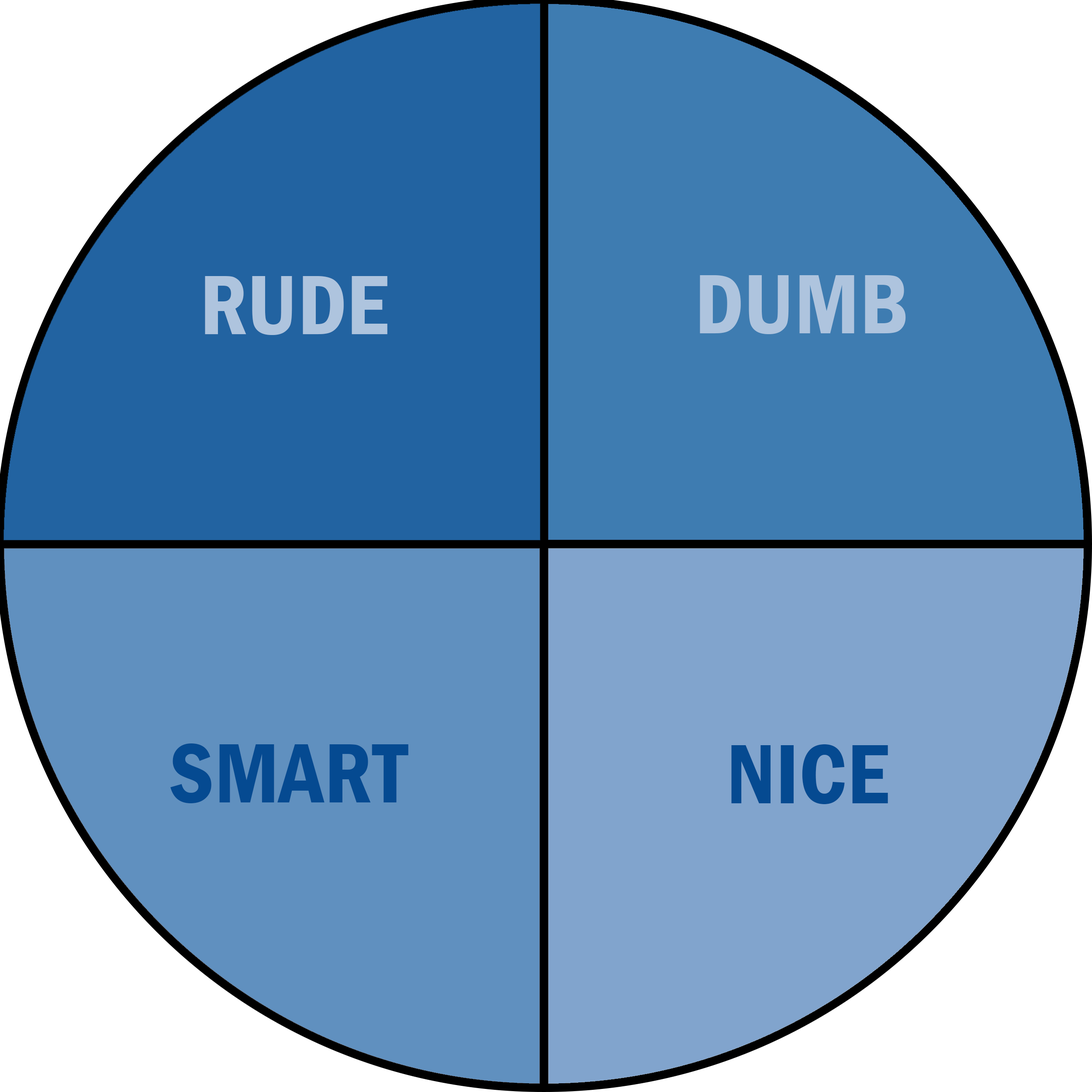
<style>
.page{position:relative;width:1092px;height:1092px;background:#ffffff}
.page>*{position:absolute;margin:0}
.t1{font:87.4px "FranklinGothic-DemiCond";color:#aec4de}
.t2{font:87.4px "FranklinGothic-DemiCond";color:#054a91}
</style>
<div class="page">
<p class="t1" style="left:205px;top:276px;width:182px;height:59px">RUDE</p>
<p class="t1" style="left:700px;top:275px;width:206px;height:59px">DUMB</p>
<p class="t2" style="left:170px;top:743px;width:238px;height:60px">SMART</p>
<p class="t2" style="left:731px;top:744px;width:157px;height:60px">NICE</p>
</div>
